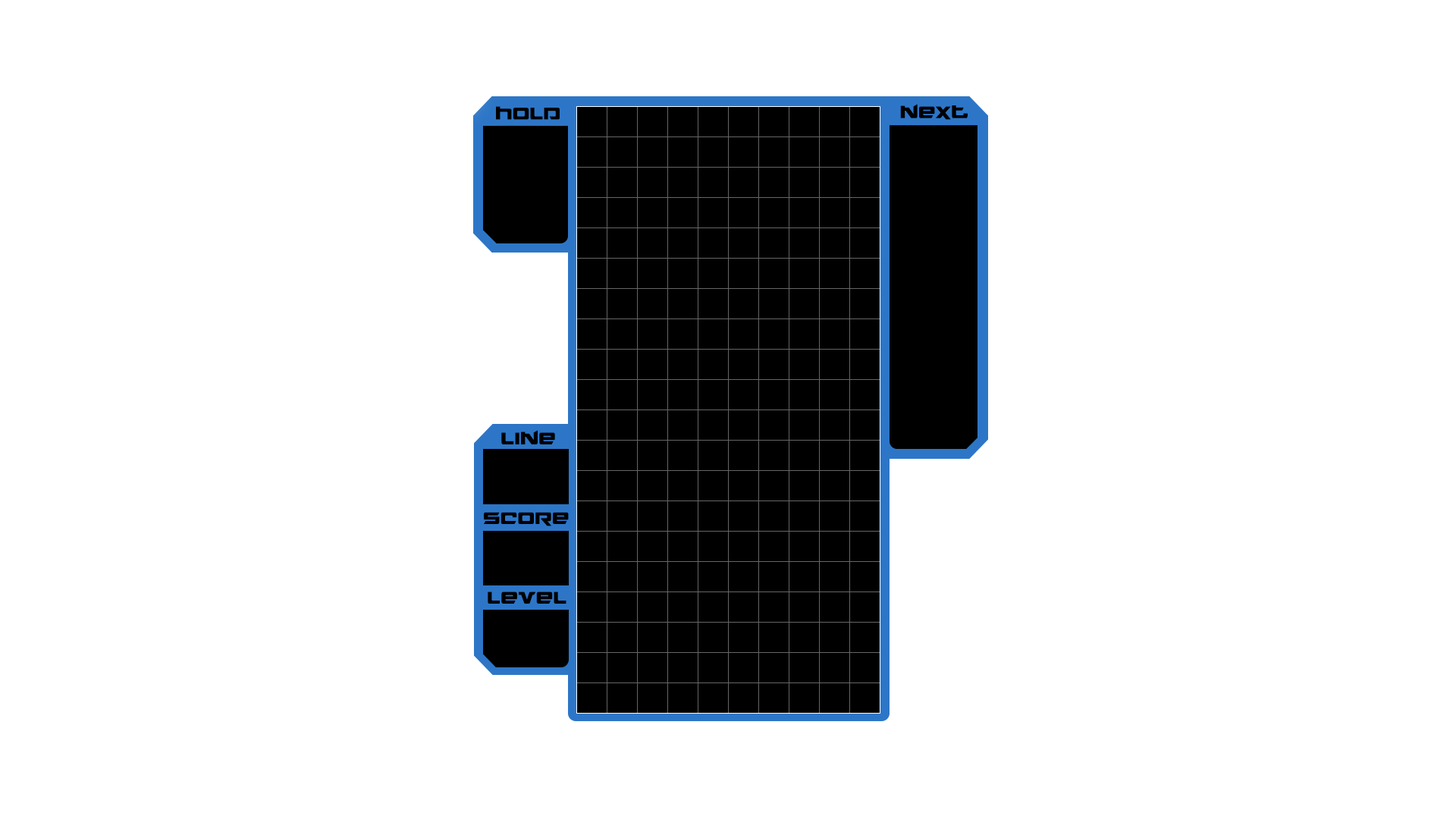
<style>
.page{position:relative;width:1456px;height:819px;background:#ffffff}
.page>*{position:absolute;margin:0}
.t1{font:20.5px "NorthstarCondensed";color:#000000}
</style>
<div class="page">
<p class="t1" style="left:496px;top:106px;width:64px;height:14px">hold</p>
<p class="t1" style="left:900px;top:104px;width:68px;height:16px">next</p>
<p class="t1" style="left:501px;top:430px;width:54px;height:14px">line</p>
<p class="t1" style="left:484px;top:512px;width:85px;height:14px">score</p>
<p class="t1" style="left:488px;top:591px;width:78px;height:13px">level</p>
</div>
